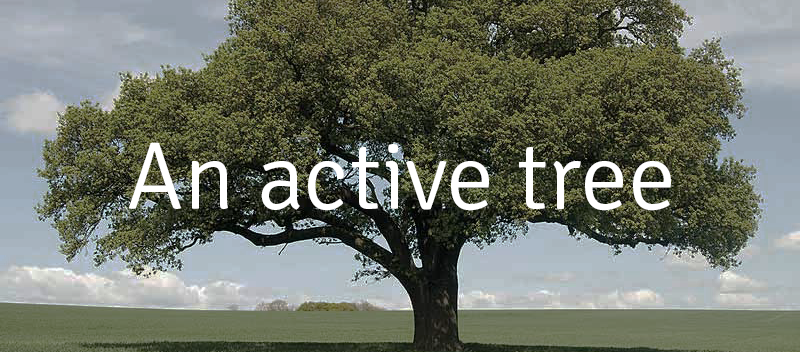
<style>
.page{position:relative;width:800px;height:352px}
.page>*{position:absolute;margin:0}
.t1{font:96px "Signika-Light";color:#ffffff}
</style>
<div class="page">
<p class="t1" style="left:128px;top:142px;width:543px;height:69px">An active tree</p>
</div>
